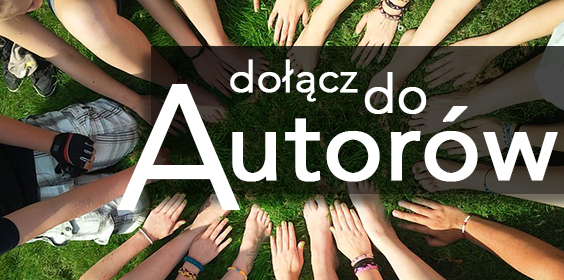
<style>
.page{position:relative;width:564px;height:280px}
.page>*{position:absolute;margin:0}
.t1{font:42.7px "Avenir-Light";color:#ffffff;font-weight:bold}
.t2{font:53.4px "Avenir-Light";color:#ffffff;font-weight:bold}
.t3{font:177.9px "Avenir-Roman";color:#ffffff}
.t4{font:100px "Avenir-Roman";color:#ffffff;font-weight:bold}
</style>
<div class="page">
<p class="t1" style="left:230px;top:59px;width:128px;height:43px">dołącz</p>
<p class="t2" style="left:364px;top:72px;width:63px;height:42px">do</p>
<p class="t3" style="left:117px;top:84px;width:124px;height:126px">A</p>
<p class="t4" style="left:232px;top:106px;width:326px;height:76px">utorów</p>
</div>
